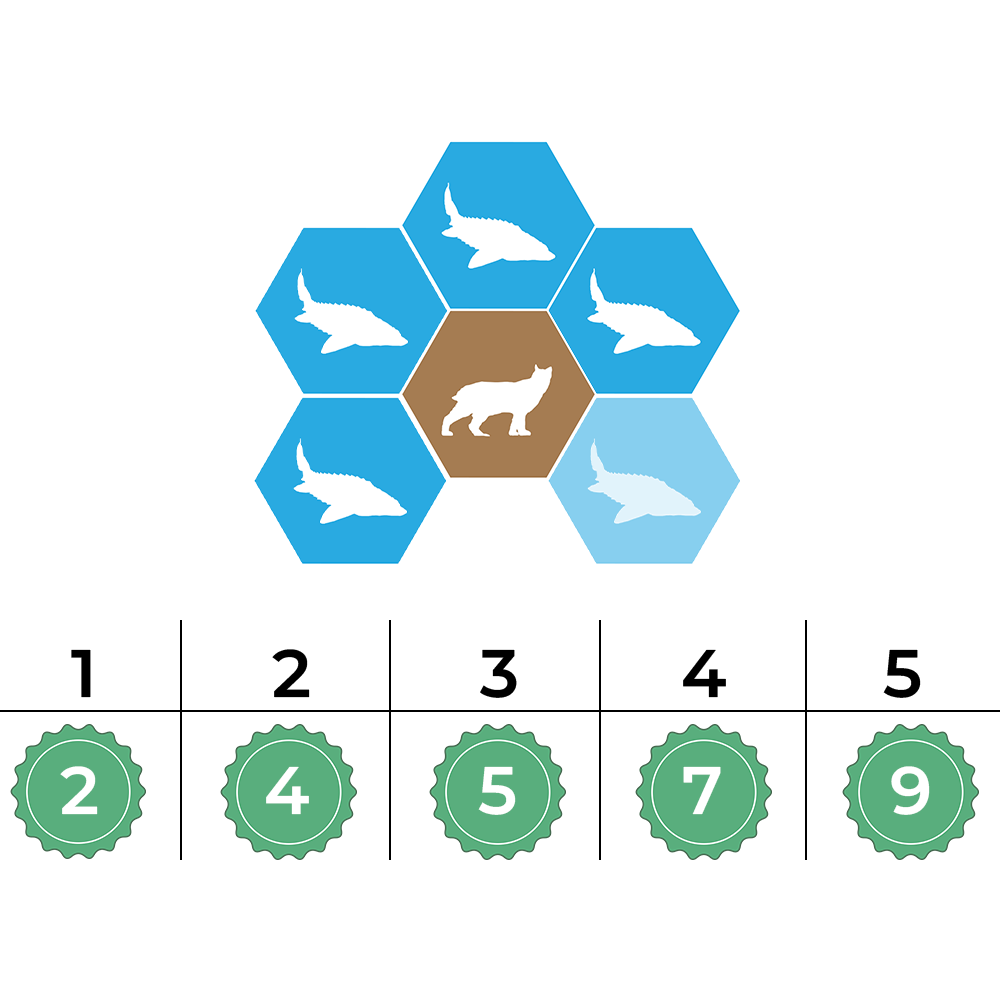
<style>
.page{position:relative;width:1000px;height:1000px;background:#ffffff}
.page>*{position:absolute;margin:0}
.t1{font:67px "MontserratRoman-SemiBold";color:#000000}
.t2{font:67px "MontserratRoman-SemiBold";color:#ffffff}
</style>
<div class="page">
<p class="t1" style="left:71px;top:649px;width:20px;height:49px">1</p>
<p class="t1" style="left:272px;top:649px;width:38px;height:49px">2</p>
<p class="t1" style="left:480px;top:649px;width:37px;height:49px">3</p>
<p class="t1" style="left:683px;top:649px;width:43px;height:49px">4</p>
<p class="t1" style="left:883px;top:649px;width:38px;height:49px">5</p>
<p class="t2" style="left:60px;top:766px;width:38px;height:49px">2</p>
<p class="t2" style="left:266px;top:766px;width:43px;height:49px">4</p>
<p class="t2" style="left:478px;top:766px;width:38px;height:49px">5</p>
<p class="t2" style="left:683px;top:766px;width:38px;height:49px">7</p>
<p class="t2" style="left:891px;top:766px;width:39px;height:49px">9</p>
</div>
